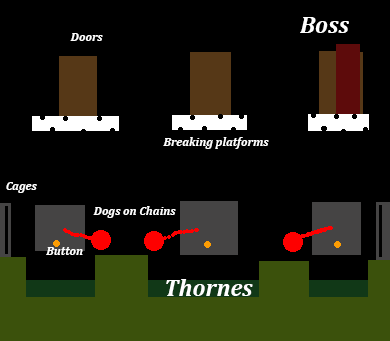
<style>
.page{position:relative;width:390px;height:341px;background:#000000}
.page>*{position:absolute;margin:0}
.t1{font:12px "Cambria-BoldItalic";color:#fefefe}
</style>
<div class="page">
<p class="t1" style="left:70px;top:33px;width:33px;height:8px">Doors</p>
<p class="t1" style="left:163px;top:137px;width:106px;height:12px">Breaking platforms</p>
<p class="t1" style="left:6px;top:182px;width:31px;height:11px">Cages</p>
<p class="t1" style="left:93px;top:206px;width:83px;height:12px">Dogs on Chains</p>
<p class="t1" style="left:46px;top:247px;width:37px;height:8px">Button</p>
</div>
